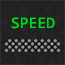
<style>
.page{position:relative;width:65px;height:65px}
.page>*{position:absolute;margin:0}
.t1{font:16px "Consolas";color:#00dd18}
</style>
<div class="page">
<p class="t1" style="left:11px;top:17px;width:44px;height:12px">SPEED</p>
</div>
